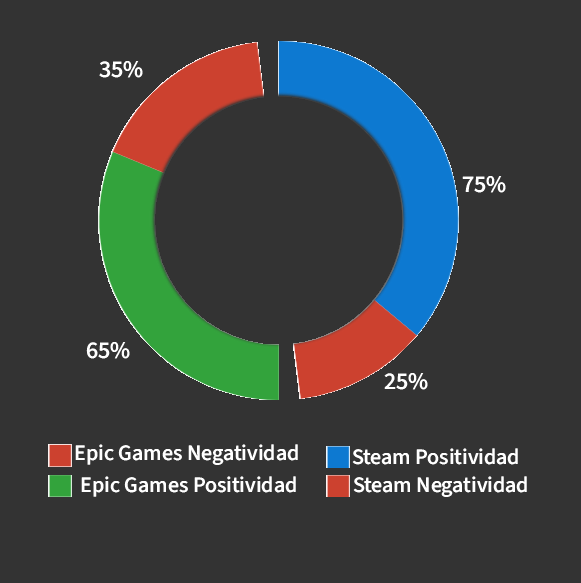
<style>
.page{position:relative;width:581px;height:583px;background:#333333}
.page>*{position:absolute;margin:0}
.t1{font:24px "SourceSans3Roman_511.000wght";color:#ffffff}
.t2{font:22px "SourceSans3Roman_511.000wght";color:#ffffff}
</style>
<div class="page">
<p class="t1" style="left:99px;top:61px;width:44px;height:17px">35%</p>
<p class="t1" style="left:462px;top:176px;width:44px;height:17px">75%</p>
<p class="t1" style="left:86px;top:342px;width:44px;height:17px">65%</p>
<p class="t1" style="left:384px;top:373px;width:44px;height:17px">25%</p>
<p class="t2" style="left:75px;top:444px;width:223px;height:21px">Epic Games Negatividad</p>
<p class="t2" style="left:352px;top:448px;width:166px;height:17px">Steam Positividad</p>
<p class="t2" style="left:81px;top:476px;width:215px;height:21px">Epic Games Positividad</p>
<p class="t2" style="left:353px;top:476px;width:174px;height:21px">Steam Negatividad</p>
</div>
